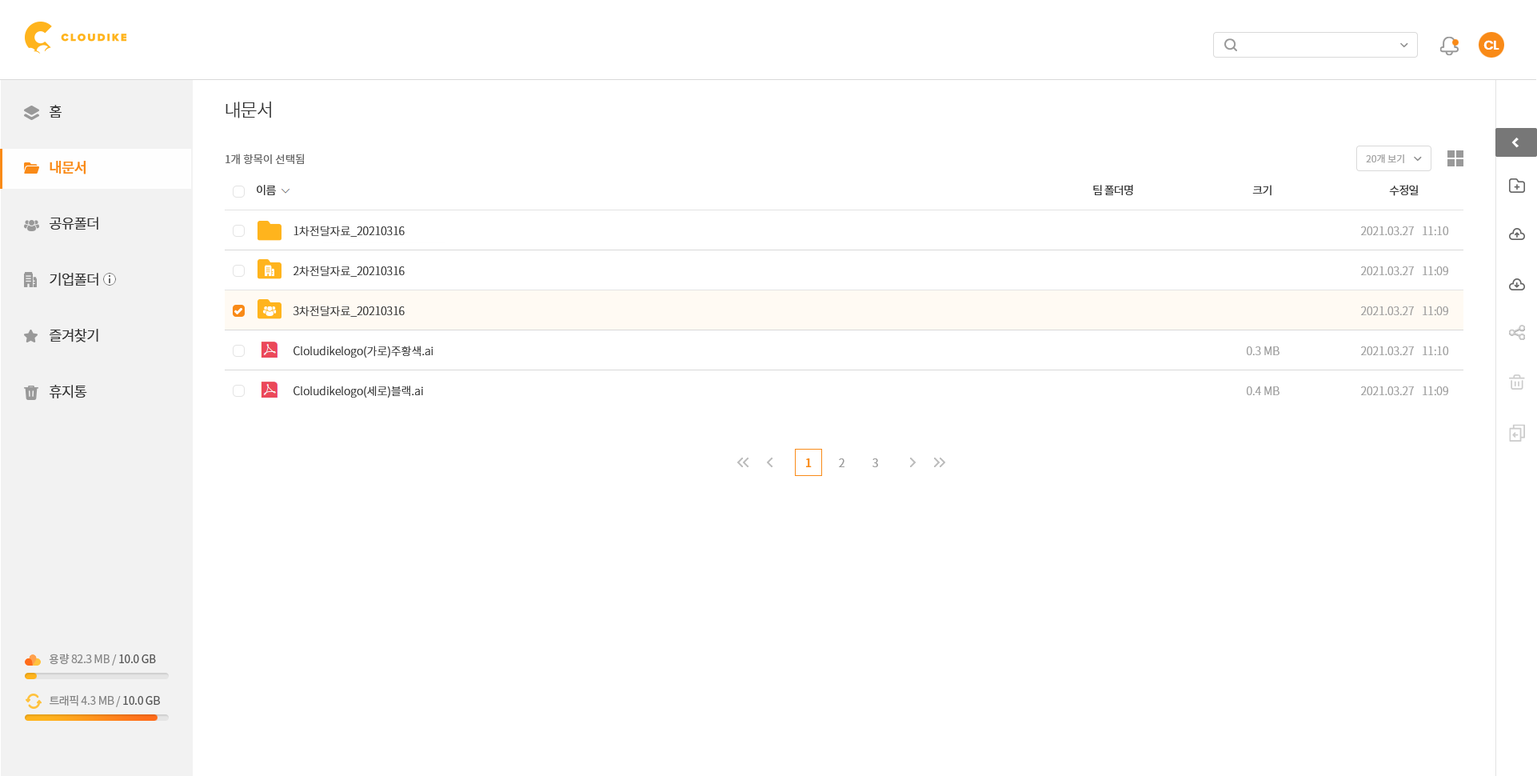
<style>
.page{position:relative;width:1537px;height:776px;background:#ffffff}
.page>*{position:absolute;margin:0}
.t1{font:12.8px "Poppins-SemiBold";letter-spacing:-0.05em;color:#ffffff}
.t2{font:18.4px "NotoSansCJKkr-Light";letter-spacing:-0.05em;color:#333333}
.t3{font:14.4px/56px "NotoSansCJKkr-DemiLight";letter-spacing:-0.05em;color:#333333}
.t4{font:14.4px/56px "NotoSansCJKkr-Medium";letter-spacing:-0.05em;color:#f98a17}
.t5{font:10.8px "NotoSansCJKkr-DemiLight";color:#666666}
.t6{font:9.6px "NotoSansCJKkr-DemiLight";color:#a1a1a1}
.t7{font:11.2px "NotoSansCJKkr-DemiLight";letter-spacing:-0.05em;color:#333333}
.t8{font:11.2px/40px "NotoSansCJKkr-Light";color:#333333}
.t9{font:11.2px/40px "NotoSansCJKkr-Light";color:#999999}
.t10{font:11.2px "NotoSansCJKkr-Medium";color:#f98a17}
.t11{font:11.2px "NotoSansCJKkr-DemiLight";color:#999999}
.t12{font:11.2px "NotoSansCJKkr-Regular";letter-spacing:-0.025em;color:#888888}
.t13{font:11.2px "NotoSansCJKkr-Regular";letter-spacing:-0.025em;color:#585858}
</style>
<div class="page">
<p class="t1" style="left:1484px;top:40px;width:16px;height:10px">CL</p>
<p class="t2" style="left:226px;top:101px;width:45px;height:17px">내문서</p>
<p class="t3" style="left:50px;top:105px;width:48px;height:293px">홈<br><span class="t4">내문서<br></span>공유폴더<br>기업폴더<br>즐겨찾기<br>휴지통</p>
<p class="t5" style="left:226px;top:154px;width:78px;height:11px">1개 항목이 선택됨</p>
<p class="t6" style="left:1366px;top:154px;width:38px;height:9px">20개 보기</p>
<p class="t7" style="left:257px;top:185px;width:19px;height:10px">이름</p>
<p class="t7" style="left:1093px;top:185px;width:40px;height:10px">팀 폴더명</p>
<p class="t7" style="left:1252px;top:185px;width:20px;height:11px">크기</p>
<p class="t7" style="left:1389px;top:185px;width:30px;height:11px">수정일</p>
<p class="t8" style="left:293px;top:226px;width:140px;height:171px">1차전달자료_20210316<br>2차전달자료_20210316<br>3차전달자료_20210316<br>Cloludikelogo(가로)주황색.ai<br>Cloludikelogo(세로)블랙.ai</p>
<p class="t9" style="left:1361px;top:226px;width:88px;height:169px">2021.03.27   11:10<br>2021.03.27   11:09<br>2021.03.27   11:09<br>2021.03.27   11:10<br>2021.03.27   11:09</p>
<p class="t9" style="left:1247px;top:346px;width:33px;height:49px">0.3 MB<br>0.4 MB</p>
<p class="t10" style="left:806px;top:458px;width:6px;height:9px">1</p>
<p class="t11" style="left:839px;top:458px;width:6px;height:9px">2</p>
<p class="t11" style="left:873px;top:458px;width:5px;height:9px">3</p>
<p class="t12" style="left:49px;top:653px;width:107px;height:12px">용량 82.3 MB / <span class="t13">10.0 GB</span></p>
<p class="t12" style="left:50px;top:695px;width:110px;height:12px">트래픽 4.3 MB / <span class="t13">10.0 GB</span></p>
</div>
